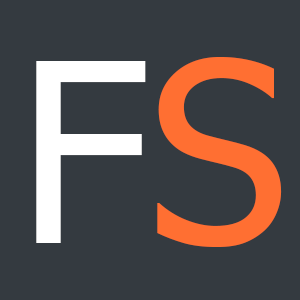
<style>
.page{position:relative;width:300px;height:300px;background:#343a40}
.page>*{position:absolute;margin:0}
.t1{font:250px "Tahoma";color:#ffffff}
.t2{font:250px "Tahoma";color:#ff6f32}
</style>
<div class="page">
<p class="t1" style="left:36px;top:57px;width:246px;height:190px">F<span class="t2">S</span></p>
</div>
